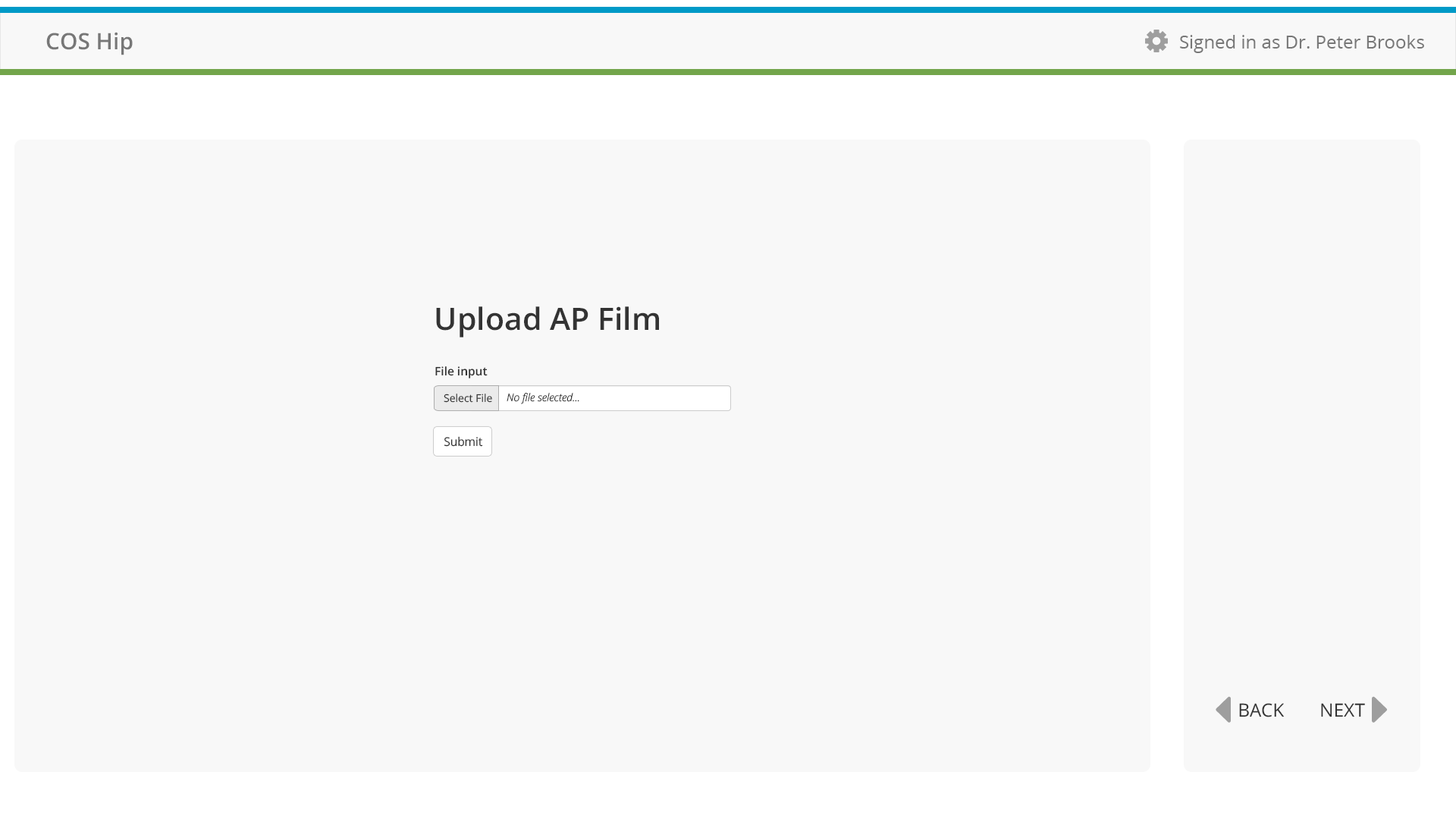
<style>
.page{position:relative;width:1456px;height:819px;background:#f8f8f8}
.page>*{position:absolute;margin:0}
.t1{font:22.6px "OpenSans-Semibold";color:#777777}
.t2{font:18.2px "OpenSans";color:#777777}
.t3{font:30.8px "OpenSans-Semibold";color:#333333}
.t4{font:11.7px "OpenSans-Semibold";color:#333333}
.t5{font:10.6px "OpenSans";color:#333333}
.t6{font:10.6px "OpenSansLight-Italic";color:#333333}
.t7{font:11.9px "OpenSans";color:#333333}
.t8{font:18.2px "OpenSans";color:#333333}
</style>
<div class="page">
<p class="t1" style="left:46px;top:32px;width:87px;height:23px">COS Hip</p>
<p class="t2" style="left:1180px;top:35px;width:244px;height:18px">Signed in as Dr. Peter Brooks</p>
<p class="t3" style="left:436px;top:306px;width:223px;height:31px">Upload AP Film</p>
<p class="t4" style="left:435px;top:366px;width:53px;height:12px">File input</p>
<p class="t5" style="left:444px;top:394px;width:48px;height:9px">Select File</p>
<p class="t6" style="left:507px;top:393px;width:72px;height:11px">No file selected...</p>
<p class="t7" style="left:444px;top:436px;width:39px;height:11px">Submit</p>
<p class="t8" style="left:1239px;top:703px;width:46px;height:14px">BACK</p>
<p class="t8" style="left:1321px;top:703px;width:44px;height:14px">NEXT</p>
</div>
